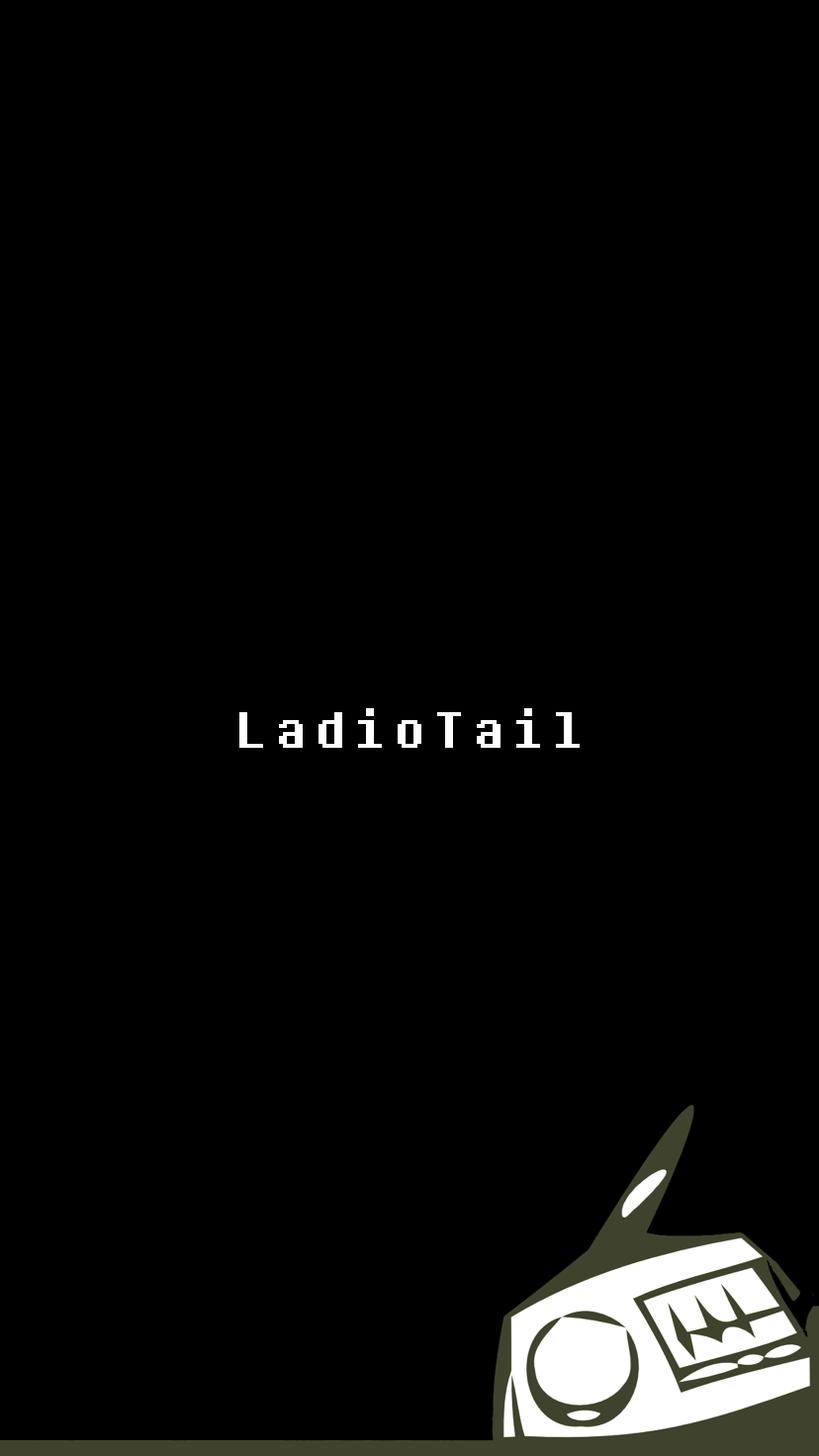
<style>
.page{position:relative;width:819px;height:1456px;background:#000000}
.page>*{position:absolute;margin:0}
.t1{font:63.3px "8bitoperator-JVE";color:#ffffff}
</style>
<div class="page">
<p class="t1" style="left:239px;top:708px;width:341px;height:40px">L a d i o T a i l</p>
</div>
